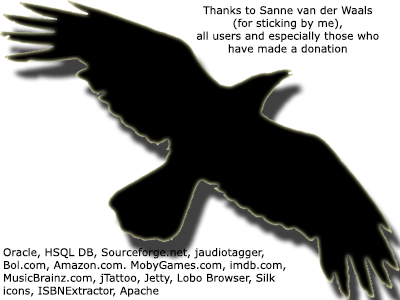
<style>
.page{position:relative;width:400px;height:300px;background:#ffffff}
.page>*{position:absolute;margin:0}
.t1{font:10.7px "Verdana";color:#000000}
</style>
<div class="page">
<p class="t1" style="left:196px;top:6px;width:183px;height:47px;text-align:center">Thanks to Sanne van der Waals <br>(for sticking by me), <br>all users and especially those who <br>have made a donation</p>
<p class="t1" style="left:3px;top:247px;width:283px;height:50px">Oracle, HSQL DB, Sourceforge.net, jaudiotagger, Bol.com, Amazon.com. MobyGames.com, imdb.com, MusicBrainz.com, jTattoo, Jetty, Lobo Browser, Silk icons, ISBNExtractor, Apache</p>
</div>
